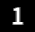
<style>
.page{position:relative;width:35px;height:32px;background:#000000}
.page>*{position:absolute;margin:0}
.t1{font:22px "WebPSD-18463539-0-Regular";color:#ffffff;font-weight:bold}
</style>
<div class="page">
<p class="t1" style="left:0px;top:0px;width:35px;height:32px">1</p>
</div>
